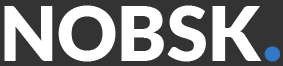
<style>
.page{position:relative;width:283px;height:66px;background:#333333}
.page>*{position:absolute;margin:0}
.t1{font:75.4px "Lato-Black";color:#ffffff}
.t2{font:88px "Lato-Black";color:#3278c7}
</style>
<div class="page">
<p class="t1" style="left:4px;top:5px;width:277px;height:57px">NOBSK<span class="t2">.</span></p>
</div>
